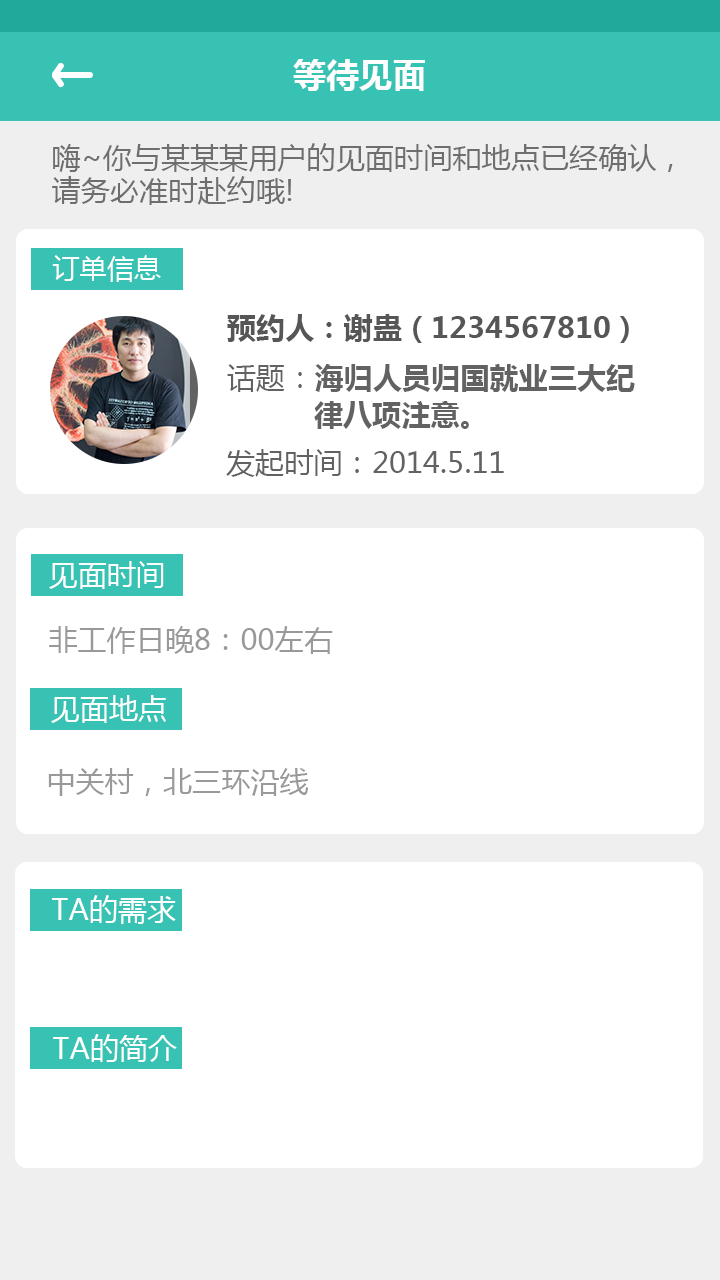
<style>
.page{position:relative;width:720px;height:1280px;background:#ffffff}
.page>*{position:absolute;margin:0}
.t1{font:33.3px "MicrosoftYaHei-Bold";color:#fefefe}
.t2{font:29.2px/33.3px "MicrosoftYaHei";color:#6e6e6e}
.t3{font:27.1px "MicrosoftYaHei";color:#fefefe}
.t4{font:29.2px "MicrosoftYaHei-Bold";color:#565656}
.t5{font:29.2px/37.5px "MicrosoftYaHei-Bold";color:#626262}
.t6{font:29.2px/37.5px "MicrosoftYaHei";color:#626262}
.t7{font:29.2px "MicrosoftYaHei";color:#626262}
.t8{font:29.2px "MicrosoftYaHei";color:#fefefe}
.t9{font:29.2px "MicrosoftYaHei";color:#999999}
.t10{font:29.2px "MicrosoftYaHei";color:#ffffff}
</style>
<div class="page">
<p class="t1" style="left:293px;top:59px;width:132px;height:32px">等待见面</p>
<p class="t2" style="left:52px;top:143px;width:621px;height:62px">嗨~你与某某某用户的见面时间和地点已经确认，<br>请务必准时赴约哦!</p>
<p class="t3" style="left:52px;top:255px;width:109px;height:27px">订单信息</p>
<p class="t4" style="left:227px;top:314px;width:402px;height:29px">预约人：谢蛊（1234567810）</p>
<p class="t5" style="left:227px;top:364px;width:408px;height:65px"><span class="t6">话题：</span>海归人员归国就业三大纪<br>          律八项注意。</p>
<p class="t7" style="left:226px;top:449px;width:278px;height:28px">发起时间：2014.5.11</p>
<p class="t8" style="left:49px;top:561px;width:115px;height:28px">见面时间</p>
<p class="t9" style="left:49px;top:626px;width:284px;height:28px">非工作日晚8：00左右</p>
<p class="t10" style="left:51px;top:695px;width:115px;height:28px">见面地点</p>
<p class="t9" style="left:48px;top:768px;width:261px;height:28px">中关村，北三环沿线</p>
<p class="t10" style="left:52px;top:895px;width:124px;height:29px">TA的需求</p>
<p class="t10" style="left:53px;top:1034px;width:124px;height:28px">TA的简介</p>
</div>
